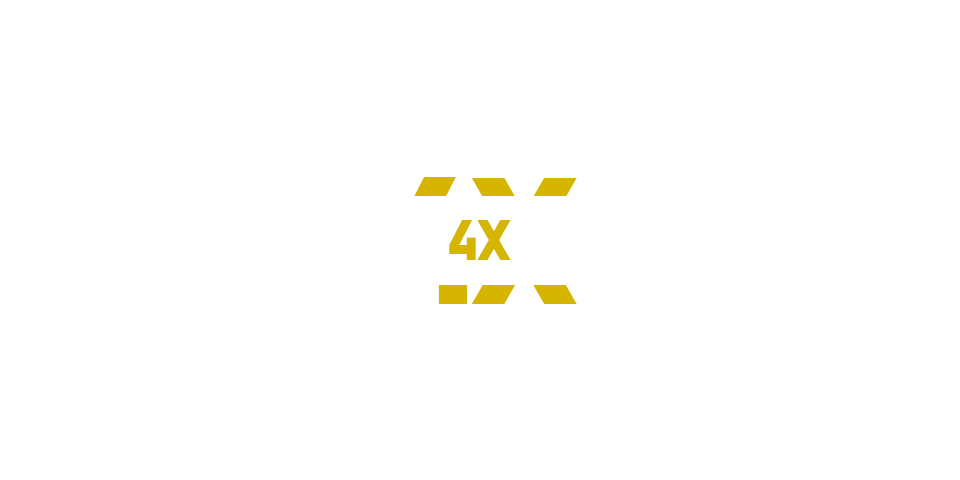
<style>
.page{position:relative;width:960px;height:480px;background:#ffffff}
.page>*{position:absolute;margin:0}
.t1{font:55px "TheNextFont";letter-spacing:-0.05em;color:#d5b500}
</style>
<div class="page">
<p class="t1" style="left:449px;top:220px;width:62px;height:40px">4x</p>
</div>
